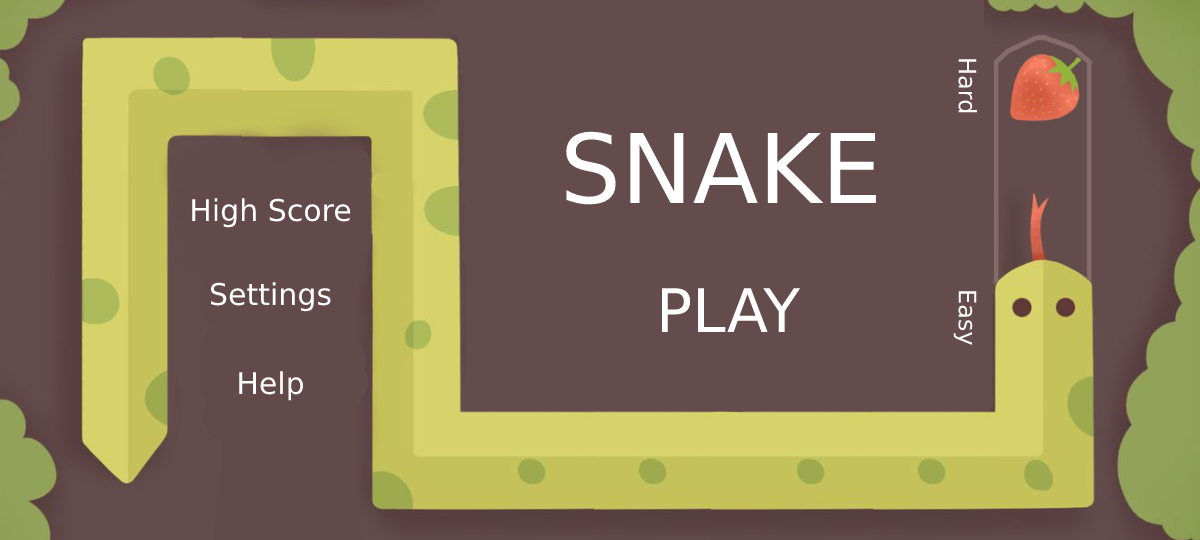
<style>
.page{position:relative;width:1200px;height:540px;background:#644c4c}
.page>*{position:absolute;margin:0}
.t1{font:24px "DejaVuSans";color:#ffffff}
.t2{font:96px "DejaVuSans";color:#ffffff}
.t3{font:30px "DejaVuSans";color:#ffffff}
.t4{font:60px "DejaVuSans";color:#ffffff}
</style>
<div class="page">
<p class="t1" style="left:958px;top:59px;width:19px;height:54px;rotate:90deg">Hard</p>
<p class="t2" style="left:566px;top:131px;width:310px;height:74px">SNAKE</p>
<p class="t3" style="left:192px;top:198px;width:159px;height:30px">High Score</p>
<p class="t3" style="left:210px;top:282px;width:121px;height:30px">Settings</p>
<p class="t4" style="left:661px;top:288px;width:140px;height:44px">PLAY</p>
<p class="t1" style="left:953px;top:291px;width:24px;height:54px;rotate:90deg">Easy</p>
<p class="t3" style="left:239px;top:371px;width:65px;height:30px">Help</p>
</div>
